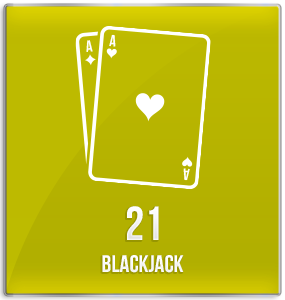
<style>
.page{position:relative;width:285px;height:300px}
.page>*{position:absolute;margin:0}
.t1{font:48px "BebasNeueBold";color:#ffffff;text-transform:uppercase}
.t2{font:24px "BebasNeueBold";color:#ffffff}
</style>
<div class="page">
<p class="t1" style="left:127px;top:206px;width:32px;height:34px">21</p>
<p class="t2" style="left:102px;top:255px;width:82px;height:18px">blackjack</p>
</div>
